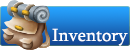
<style>
.page{position:relative;width:130px;height:50px}
.page>*{position:absolute;margin:0}
.t1{font:18px "Sylfaen";color:#ffffff}
</style>
<div class="page">
<p class="t1" style="left:52px;top:28px;width:76px;height:18px">Inventory</p>
</div>
